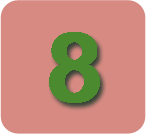
<style>
.page{position:relative;width:146px;height:134px;background:#d68a82}
.page>*{position:absolute;margin:0}
.t1{font:94.7px "ArialRoundedMTBold";letter-spacing:-0.01em;color:#4b8a2f;font-weight:bold}
</style>
<div class="page">
<p class="t1" style="left:49px;top:32px;width:51px;height:71px">8</p>
</div>
